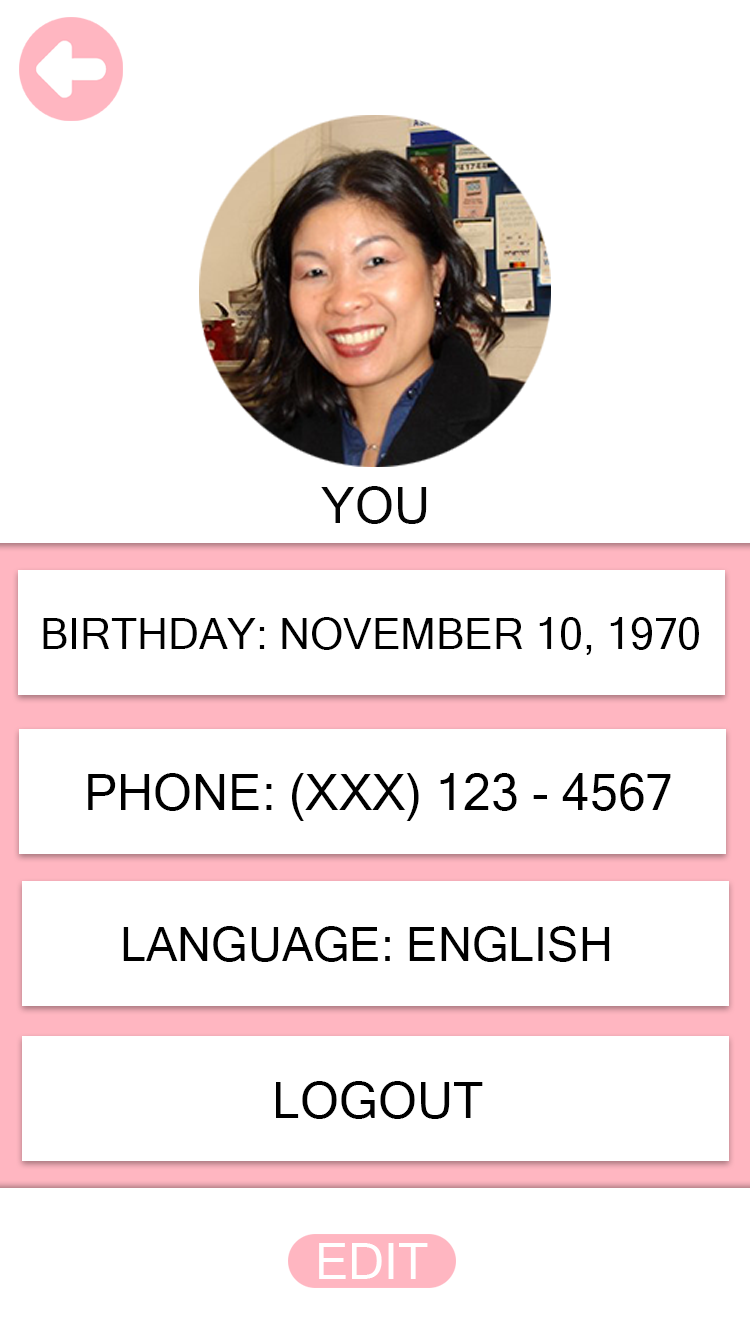
<style>
.page{position:relative;width:750px;height:1334px;background:#ffffff}
.page>*{position:absolute;margin:0}
.t1{font:50px "MicrosoftSansSerif";color:#050505}
.t2{font:42.8px "MicrosoftSansSerif";color:#000000}
.t3{font:50px "MicrosoftSansSerif";color:#000000}
.t4{font:47px "MicrosoftSansSerif";color:#000000}
.t5{font:50px "MicrosoftSansSerif";color:#ffffff}
</style>
<div class="page">
<p class="t1" style="left:321px;top:486px;width:106px;height:38px">YOU</p>
<p class="t2" style="left:43px;top:617px;width:656px;height:38px">BIRTHDAY: NOVEMBER 10, 1970</p>
<p class="t3" style="left:88px;top:773px;width:583px;height:48px">PHONE: (XXX) 123 - 4567</p>
<p class="t4" style="left:123px;top:926px;width:487px;height:36px">LANGUAGE: ENGLISH</p>
<p class="t3" style="left:276px;top:1081px;width:207px;height:38px">LOGOUT</p>
<p class="t5" style="left:319px;top:1243px;width:109px;height:36px">EDIT</p>
</div>
